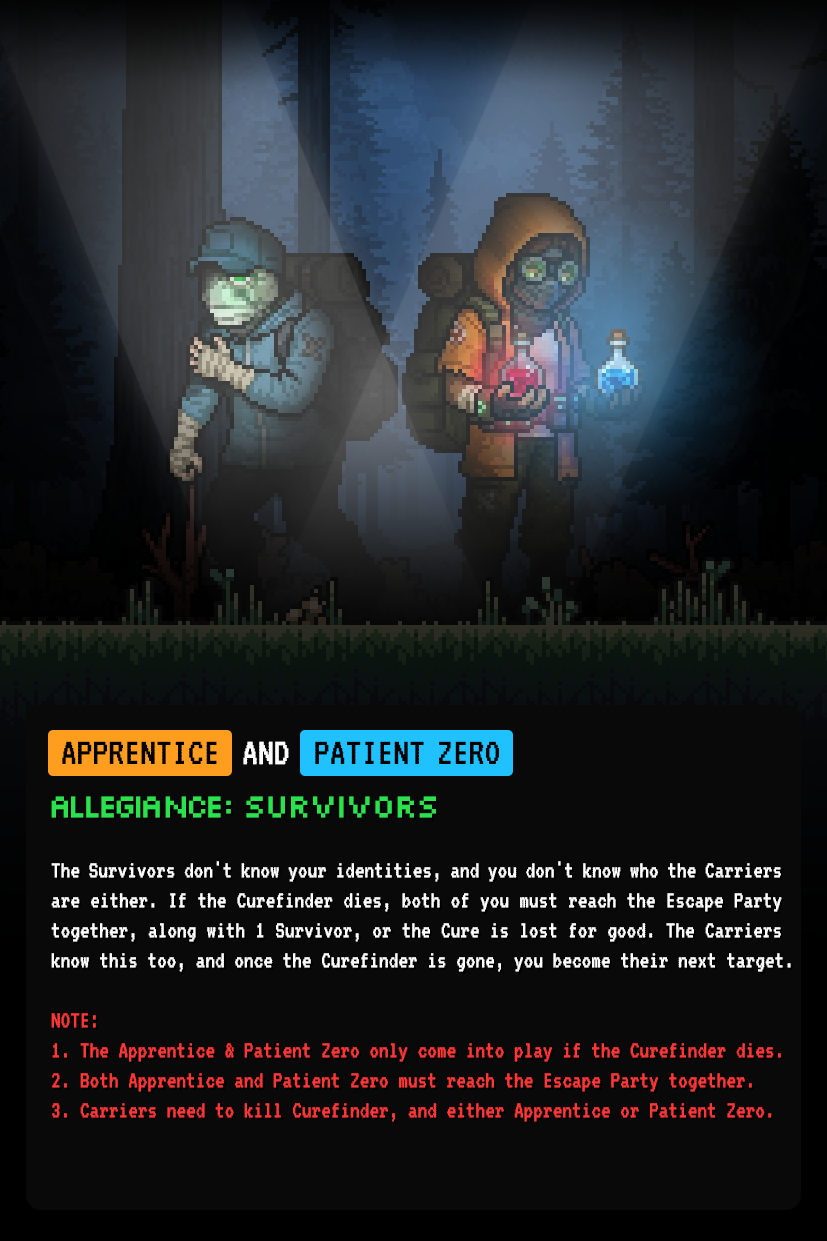
<style>
.page{position:relative;width:827px;height:1241px;background:#090909}
.page>*{position:absolute;margin:0}
.t1{font:39.7px "VT323-Regular";color:#000000}
.t2{font:39.7px "VT323-Regular";color:#ffffff}
.t3{font:25px "VT323-Regular";color:#ffffff;scale:0.96 1}
.t4{font:33.3px "Silkscreen-Regular";letter-spacing:-0.05em;color:#2be24d;scale:0.96 1}
.t5{font:25px "VT323-Regular";color:#ff3737;scale:0.96 1}
</style>
<div class="page">
<p class="t1" style="left:62px;top:741px;width:155px;height:23px">APPRENTICE</p>
<p class="t2" style="left:243px;top:741px;width:46px;height:24px">AND</p>
<p class="t1" style="left:315px;top:741px;width:184px;height:23px">PATIENT ZERO</p>
<p class="t3" style="left:51px;top:796px;width:740px;height:326px;text-align:justify"><span class="t4">allegiancE: SURVIVORS<br></span><br>The Survivors don't know your identities, and you don't know who the Carriers are either. If the Curefinder dies, both of you must reach the Escape Party together, along with 1 Survivor, or the Cure is lost for good. The Carriers know this too, and once the Curefinder is gone, you become their next target.<br><br><span class="t5">NOTE:<br>1. The Apprentice &amp; Patient Zero only come into play if the Curefinder dies.<br>2. Both Apprentice and Patient Zero must reach the Escape Party together.<br>3. Carriers need to kill Curefinder, and either Apprentice or Patient Zero.</span></p>
</div>
